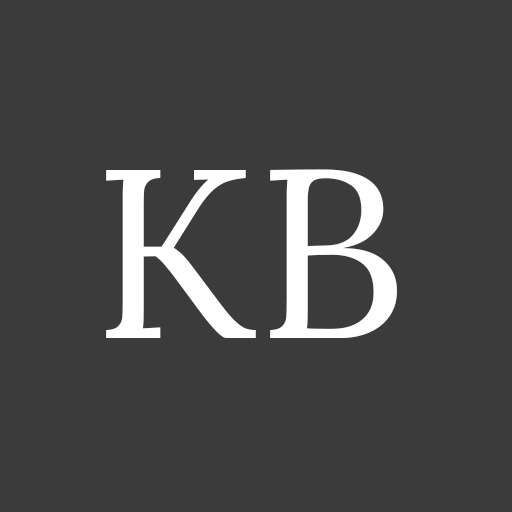
<style>
.page{position:relative;width:512px;height:512px;background:#3b3b3b}
.page>*{position:absolute;margin:0}
.t1{font:240px "Lora-Regular";color:#ffffff}
</style>
<div class="page">
<p class="t1" style="left:106px;top:169px;width:291px;height:169px">KB</p>
</div>
